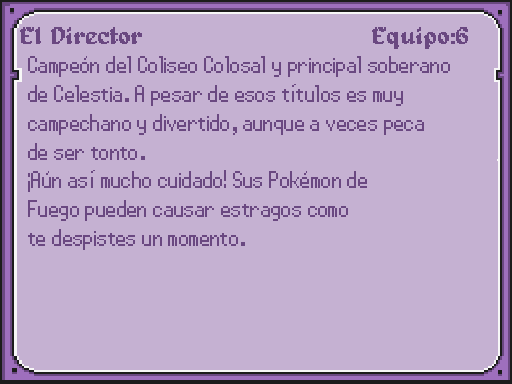
<style>
.page{position:relative;width:512px;height:384px;background:#c5b1d2}
.page>*{position:absolute;margin:0}
.t1{font:24px "Alagard";color:#6a4881}
.t2{font:24px "PowerClear-Regular";letter-spacing:-0.025em;color:#6a4881}
</style>
<div class="page">
<p class="t1" style="left:20px;top:27px;width:122px;height:17px">El Director</p>
<p class="t1" style="left:372px;top:27px;width:96px;height:22px">Equipo:6</p>
<p class="t2" style="left:28px;top:56px;width:422px;height:194px">Campeón del Coliseo Colosal y principal soberano<br>de Celestia. A pesar de esos títulos es muy<br>campechano y divertido, aunque a veces peca<br>de ser tonto.<br>¡Aún así mucho cuidado! Sus Pokémon de<br>Fuego pueden causar estragos como<br>te despistes un momento.</p>
</div>
